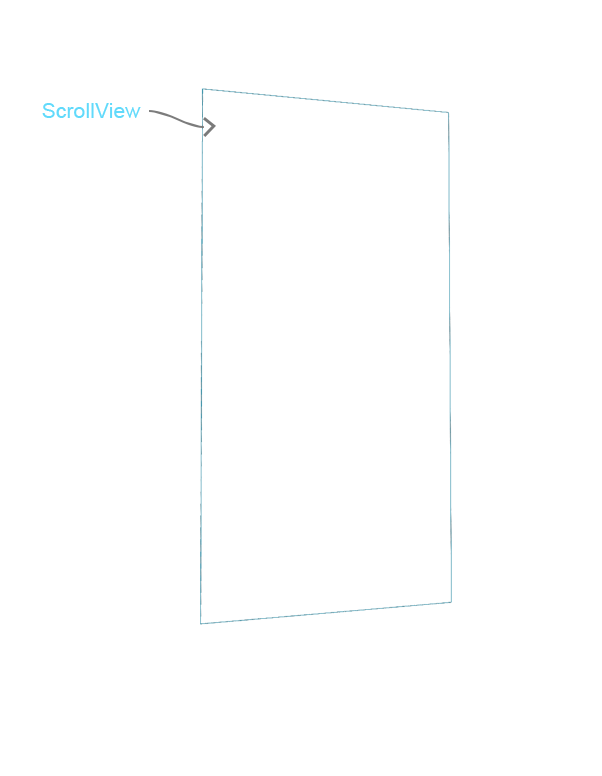
<style>
.page{position:relative;width:602px;height:776px;background:#ffffff}
.page>*{position:absolute;margin:0}
.t1{font:21.3px "ArialMT";color:#61dafb}
</style>
<div class="page">
<p class="t1" style="left:42px;top:103px;width:99px;height:15px">ScrollView</p>
</div>
